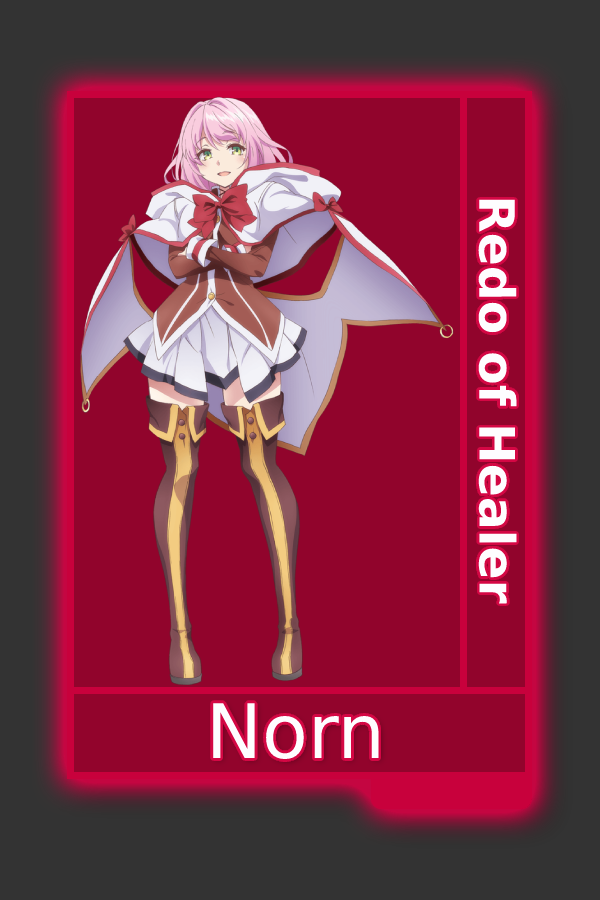
<style>
.page{position:relative;width:600px;height:900px;background:#91042c}
.page>*{position:absolute;margin:0}
.t1{font:48.8px "MADETOMMY-Bold";color:#fefdff}
.t2{font:75px "CoolveticaRg-Regular";color:#fefdff}
</style>
<div class="page">
<p class="t1" style="left:478px;top:199px;width:39px;height:405px;rotate:90deg">Redo of Healer</p>
<p class="t2" style="left:213px;top:703px;width:166px;height:57px">Norn</p>
</div>
